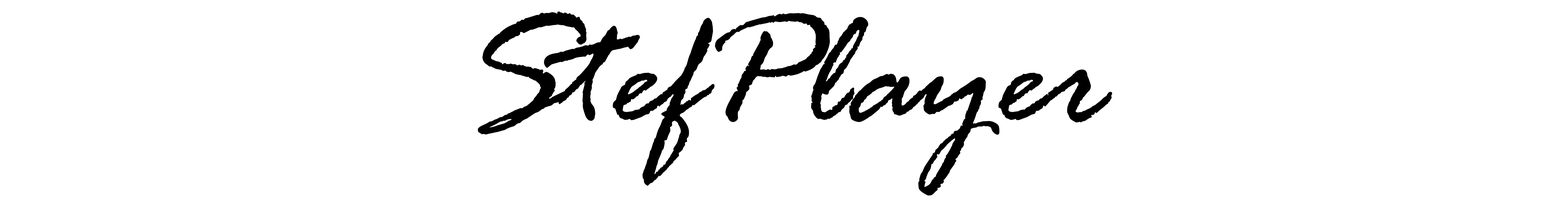
<style>
.page{position:relative;width:1568px;height:209px;background:#ffffff}
.page>*{position:absolute;margin:0}
.t1{font:170.6px "RageItalic";color:#000000}
</style>
<div class="page">
<p class="t1" style="left:478px;top:11px;width:634px;height:185px">StefPlayer</p>
</div>
